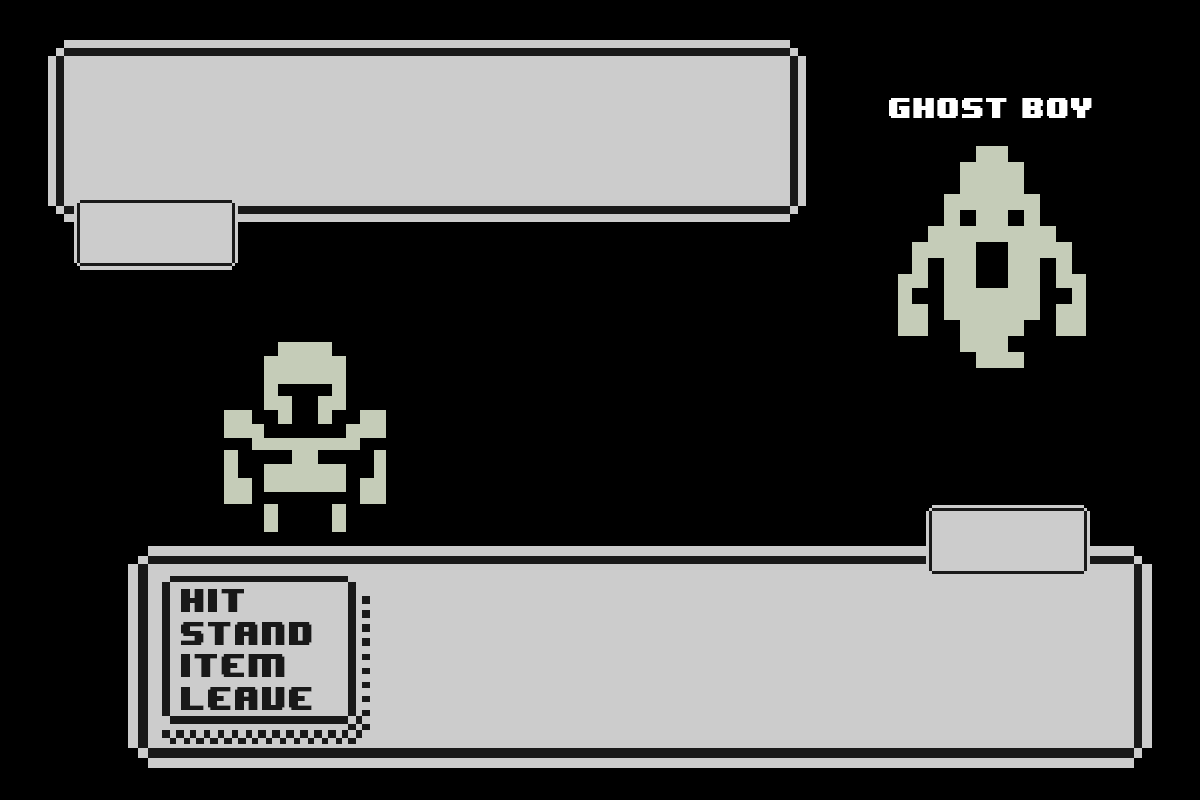
<style>
.page{position:relative;width:1200px;height:800px;background:#000000}
.page>*{position:absolute;margin:0}
.t1{font:24.3px "8BITWONDERNominal";color:#ffffff}
.t2{font:27px "8BITWONDERNominal";color:#191919}
</style>
<div class="page">
<p class="t1" style="left:889px;top:98px;width:203px;height:20px">ghost boy</p>
<p class="t2" style="left:181px;top:589px;width:131px;height:121px">hit<br>stand<br>item<br>leave</p>
</div>
